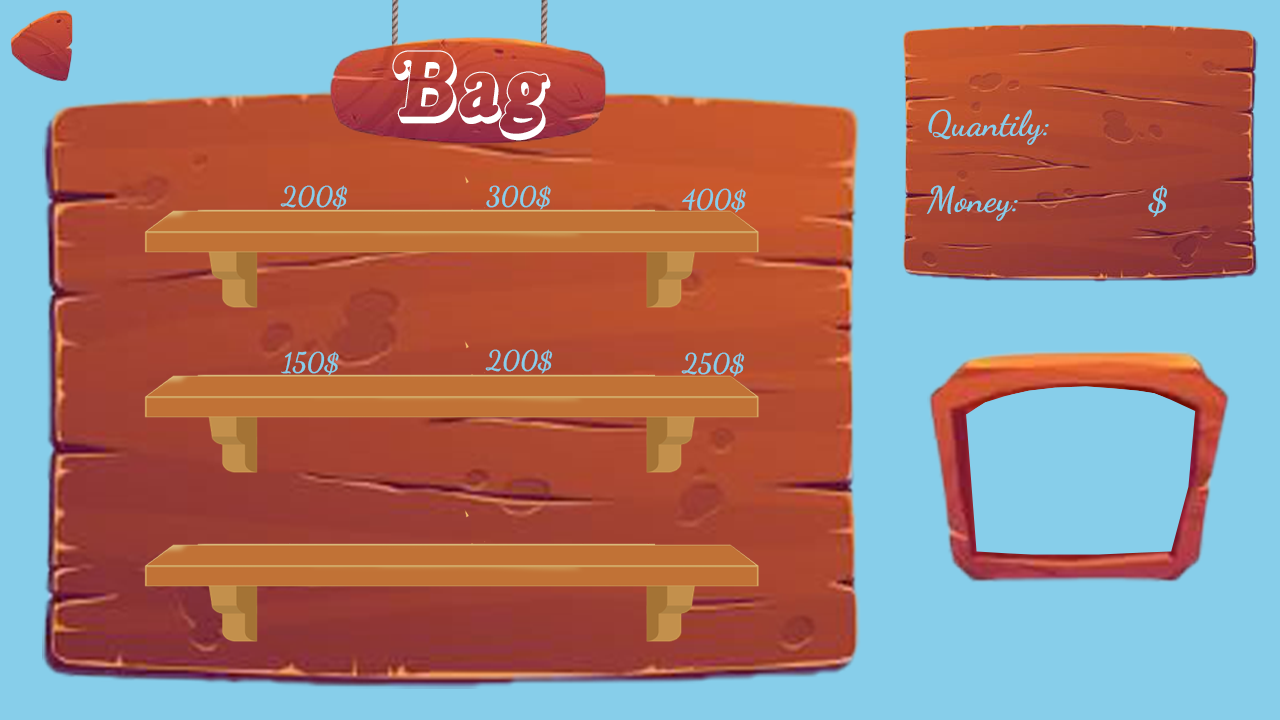
<style>
.page{position:relative;width:1280px;height:720px;background:#87ceea}
.page>*{position:absolute;margin:0}
.t1{font:91px "Kamryn-3DItalic";color:#ffffff}
.t2{font:35.4px "DancingScript-Bold";color:#87ceea}
.t3{font:26.9px "DancingScript-Bold";color:#87ceea}
</style>
<div class="page">
<p class="t1" style="left:392px;top:50px;width:159px;height:91px">Bag</p>
<p class="t2" style="left:928px;top:109px;width:121px;height:36px">Quantily:</p>
<p class="t3" style="left:280px;top:185px;width:68px;height:25px">200$</p>
<p class="t3" style="left:486px;top:185px;width:65px;height:25px">300$</p>
<p class="t2" style="left:926px;top:185px;width:241px;height:36px">Money:              $</p>
<p class="t3" style="left:682px;top:188px;width:64px;height:25px">400$</p>
<p class="t3" style="left:281px;top:351px;width:58px;height:25px">150$</p>
<p class="t3" style="left:485px;top:349px;width:68px;height:25px">200$</p>
<p class="t3" style="left:681px;top:352px;width:64px;height:25px">250$</p>
</div>
